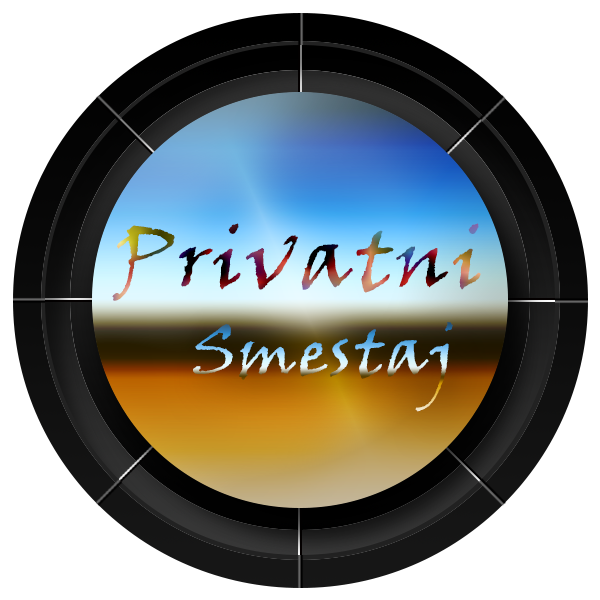
<style>
.page{position:relative;width:600px;height:600px;background:#ffffff}
.page>*{position:absolute;margin:0}
.t1{font:83.3px "VinerHandITC";letter-spacing:0.03em}
.t2{font:66.7px "VinerHandITC";letter-spacing:0.03em}
</style>
<div class="page">
<p class="t1" style="left:112px;top:223px;width:369px;height:78px">Privatni</p>
<p class="t2" style="left:193px;top:322px;width:260px;height:90px">Smestaj</p>
</div>
